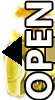
<style>
.page{position:relative;width:55px;height:100px;background:#ffffff}
.page>*{position:absolute;margin:0}
.t1{font:35.8px "LaoUI-Bold";color:#ffffff;scale:1.04 1}
</style>
<div class="page">
<p class="t1" style="left:26px;top:2px;width:26px;height:97px;rotate:-90deg">OPEN</p>
</div>
